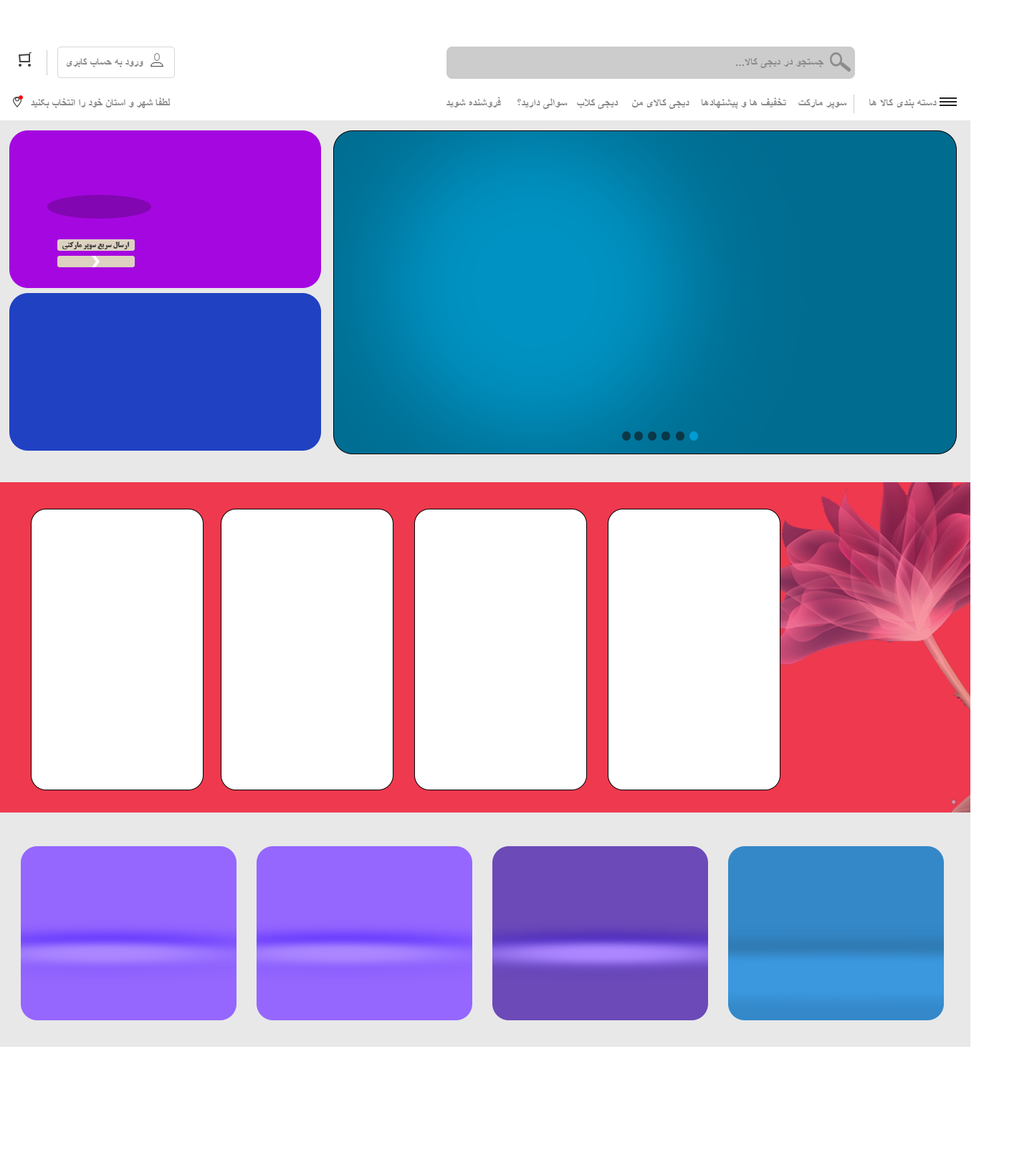
<style>
.page{position:relative;width:1032px;height:1155px;background:#ffffff}
.page>*{position:absolute;margin:0}
.t1{font:10.7px "Arial-BoldMT";color:#898989}
.t2{font:10.7px "Arial-BoldMT";color:#898989;scale:1.09 1}
.t3{font:7.5px "TitrBold";color:#454545}
</style>
<div class="page">
<p class="t1" style="left:67px;top:58px;width:76px;height:9px">ورود به حساب کابری</p>
<p class="t2" style="left:735px;top:58px;width:89px;height:10px">...جستجو در دیجی کالا</p>
<p class="t1" style="left:31px;top:97px;width:139px;height:11px">لطفا شهر و استان خود را انتخاب بکنید</p>
<p class="t2" style="left:447px;top:97px;width:54px;height:11px">فروشنده شوید</p>
<p class="t2" style="left:517px;top:98px;width:51px;height:11px">سوالی دارید؟</p>
<p class="t2" style="left:577px;top:99px;width:41px;height:10px">دیجی کلاب</p>
<p class="t2" style="left:632px;top:99px;width:57px;height:10px">دیجی کالای من</p>
<p class="t2" style="left:701px;top:97px;width:85px;height:12px">تخفیف ها و پیشنهادها</p>
<p class="t2" style="left:798px;top:99px;width:48px;height:10px">سوپر مارکت</p>
<p class="t2" style="left:869px;top:99px;width:68px;height:9px">دسته بندی کالا ها</p>
<p class="t3" style="left:62px;top:242px;width:68px;height:7px">ارسال سریع سوپر مارکتی</p>
</div>
